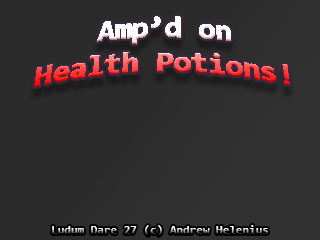
<style>
.page{position:relative;width:320px;height:240px;background:#2b2b2b}
.page>*{position:absolute;margin:0}
.t1{font:30px "Consolas-Bold"}
.t2{font:12px "Consolas-Bold"}
</style>
<div class="page">
<p class="t1" style="left:34px;top:16px;width:256px;height:71px;text-align:center">Amp’d on<br>Health Potions!</p>
<p class="t2" style="left:52px;top:225px;width:216px;height:11px">Ludum Dare 27 (c) Andrew Helenius</p>
</div>
